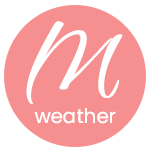
<style>
.page{position:relative;width:150px;height:150px;background:#f69090}
.page>*{position:absolute;margin:0}
.t1{font:138.4px "Qwigley-Regular";color:#ffffff}
.t2{font:20px "Poppins-Regular";color:#ffffff}
</style>
<div class="page">
<p class="t1" style="left:26px;top:21px;width:97px;height:84px">M</p>
<p class="t2" style="left:34px;top:108px;width:82px;height:16px">weather</p>
</div>
